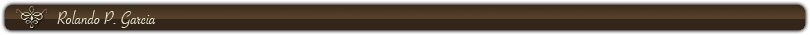
<style>
.page{position:relative;width:810px;height:35px;background:#332519}
.page>*{position:absolute;margin:0}
.t1{font:20px "SavoyeLetPlain";color:#e2dfc3}
</style>
<div class="page">
<p class="t1" style="left:57px;top:10px;width:99px;height:18px">Rolando P. Garcia</p>
</div>
